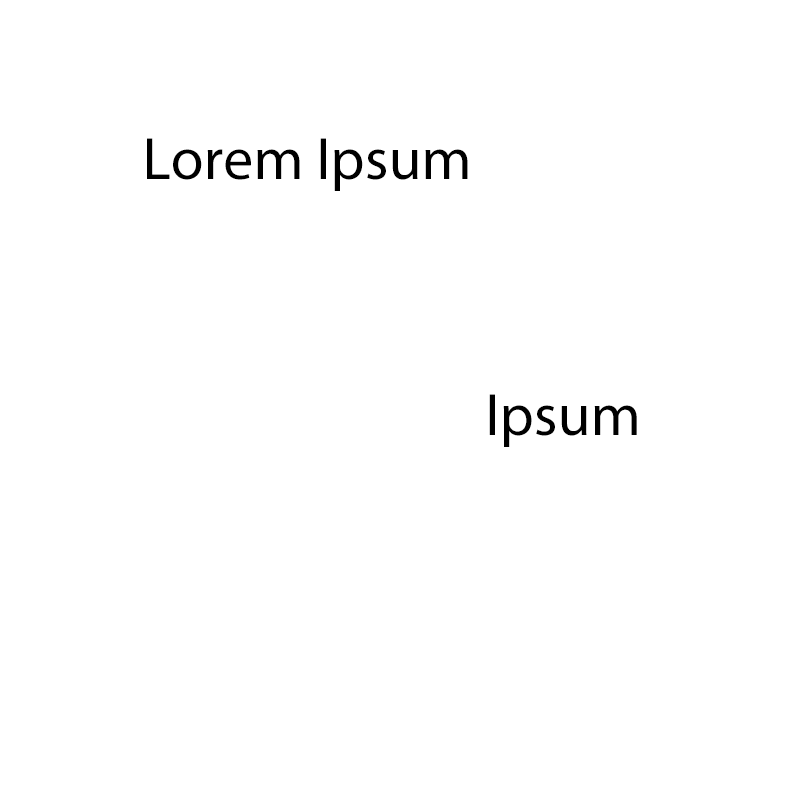
<style>
.page{position:relative;width:800px;height:800px;background:#ffffff}
.page>*{position:absolute;margin:0}
.t1{font:60px "MyriadPro-Regular";color:#000000}
</style>
<div class="page">
<p class="t1" style="left:147px;top:138px;width:321px;height:53px">Lorem Ipsum</p>
<p class="t1" style="left:489px;top:394px;width:148px;height:53px">Ipsum</p>
</div>
